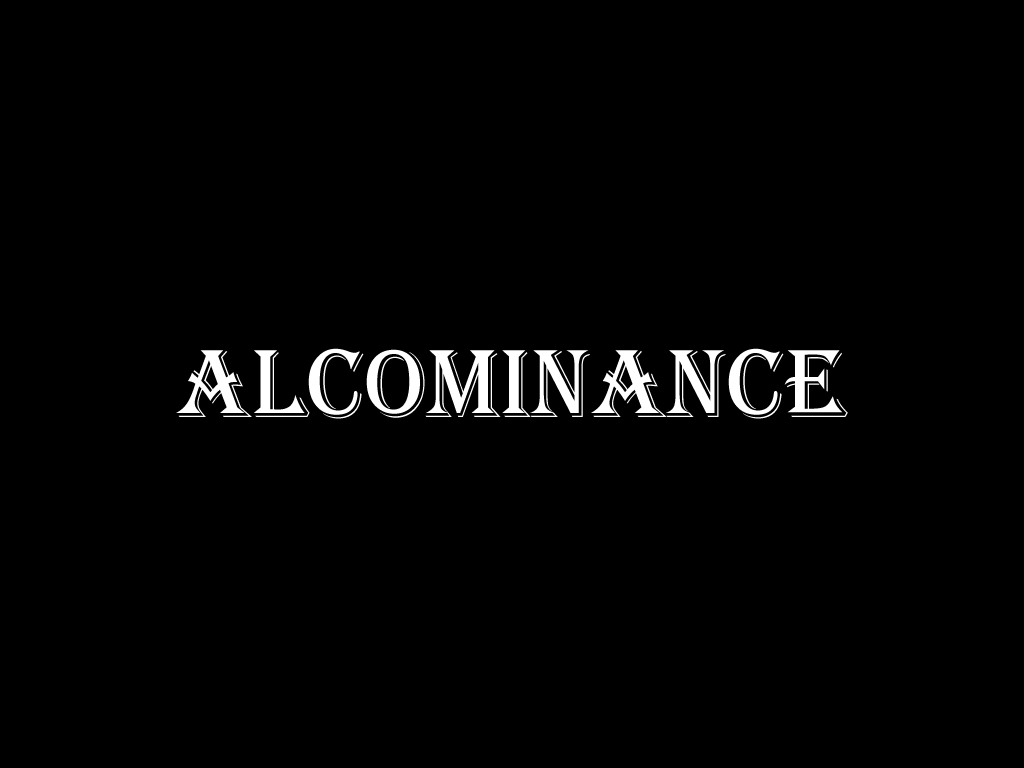
<style>
.page{position:relative;width:1024px;height:768px;background:#000000}
.page>*{position:absolute;margin:0}
.t1{font:100px "Algerian";color:#ffffff}
</style>
<div class="page">
<p class="t1" style="left:176px;top:348px;width:672px;height:71px">ALCOMINANCE</p>
</div>
